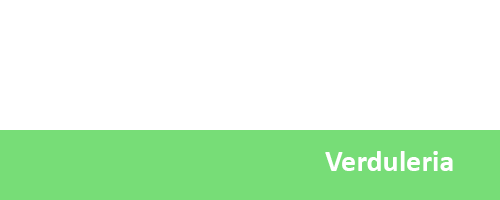
<style>
.page{position:relative;width:500px;height:200px;background:#ffffff}
.page>*{position:absolute;margin:0}
.t1{font:30px "Calibri-Bold";color:#ffffff}
</style>
<div class="page">
<p class="t1" style="left:325px;top:151px;width:128px;height:20px">Verduleria</p>
</div>
